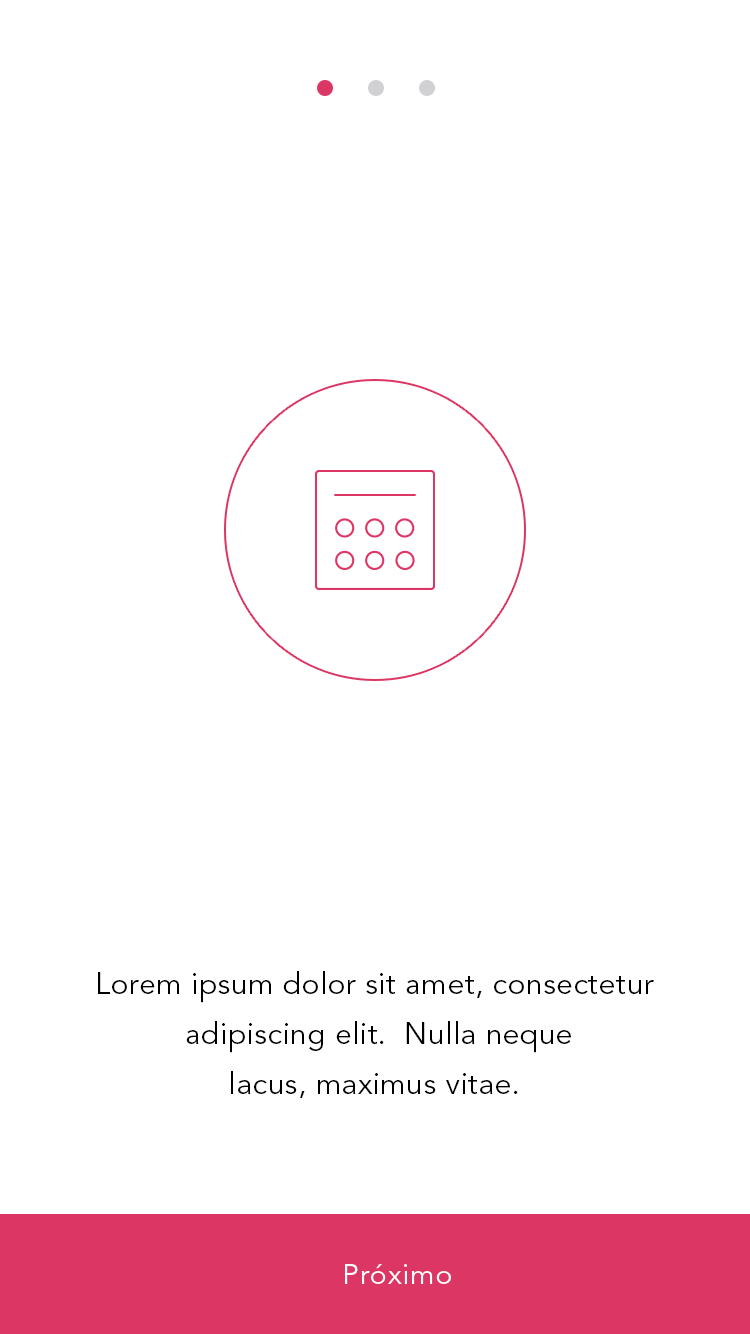
<style>
.page{position:relative;width:750px;height:1334px;background:#ffffff}
.page>*{position:absolute;margin:0}
.t1{font:30px/50px "AvenirLTStd-Book";letter-spacing:0.016em;color:#000000}
.t2{font:28px "AvenirLTStd-Book";letter-spacing:0.046em;color:#ffffff}
</style>
<div class="page">
<p class="t1" style="left:98px;top:971px;width:556px;height:127px;text-align:center">Lorem ipsum dolor sit amet, consectetur<br> adipiscing elit.  Nulla neque<br>lacus, maximus vitae.</p>
<p class="t2" style="left:345px;top:1264px;width:106px;height:20px">Próximo</p>
</div>
